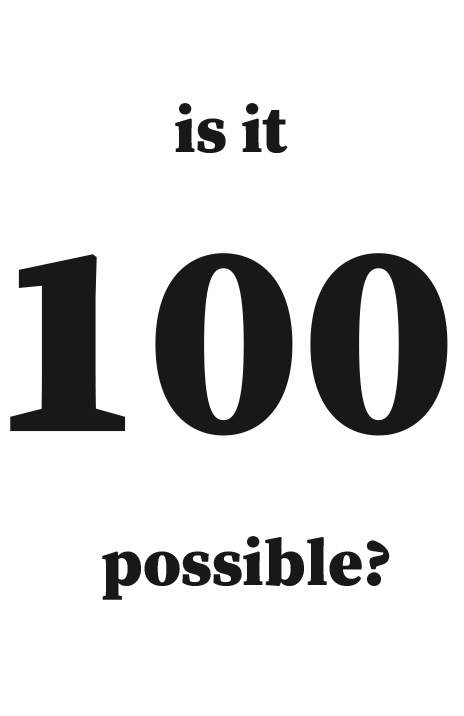
<style>
.page{position:relative;width:464px;height:716px;background:#ffffff}
.page>*{position:absolute;margin:0}
.t1{font:66.7px "SourceSerifRoman-Black";color:#181818}
.t2{font:277.8px "SourceSerifRoman-Black";color:#181818}
</style>
<div class="page">
<p class="t1" style="left:175px;top:103px;width:113px;height:50px">is it</p>
<p class="t2" style="left:10px;top:253px;width:438px;height:183px">100</p>
<p class="t1" style="left:102px;top:536px;width:288px;height:64px">possible?</p>
</div>
